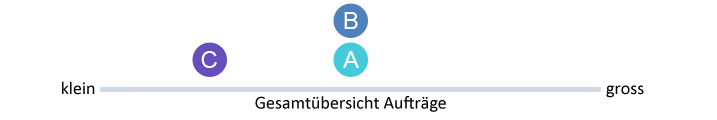
<style>
.page{position:relative;width:717px;height:120px;background:#ffffff}
.page>*{position:absolute;margin:0}
.t1{font:24px "ArialMT";color:#ffffff}
.t2{font:18px "Calibri";color:#000000}
</style>
<div class="page">
<p class="t1" style="left:344px;top:12px;width:14px;height:17px">B</p>
<p class="t1" style="left:201px;top:51px;width:16px;height:17px">C</p>
<p class="t1" style="left:343px;top:51px;width:16px;height:17px">A</p>
<p class="t2" style="left:62px;top:81px;width:33px;height:14px">klein</p>
<p class="t2" style="left:606px;top:85px;width:38px;height:13px">gross</p>
<p class="t2" style="left:255px;top:96px;width:191px;height:16px">Gesamtübersicht Aufträge</p>
</div>
